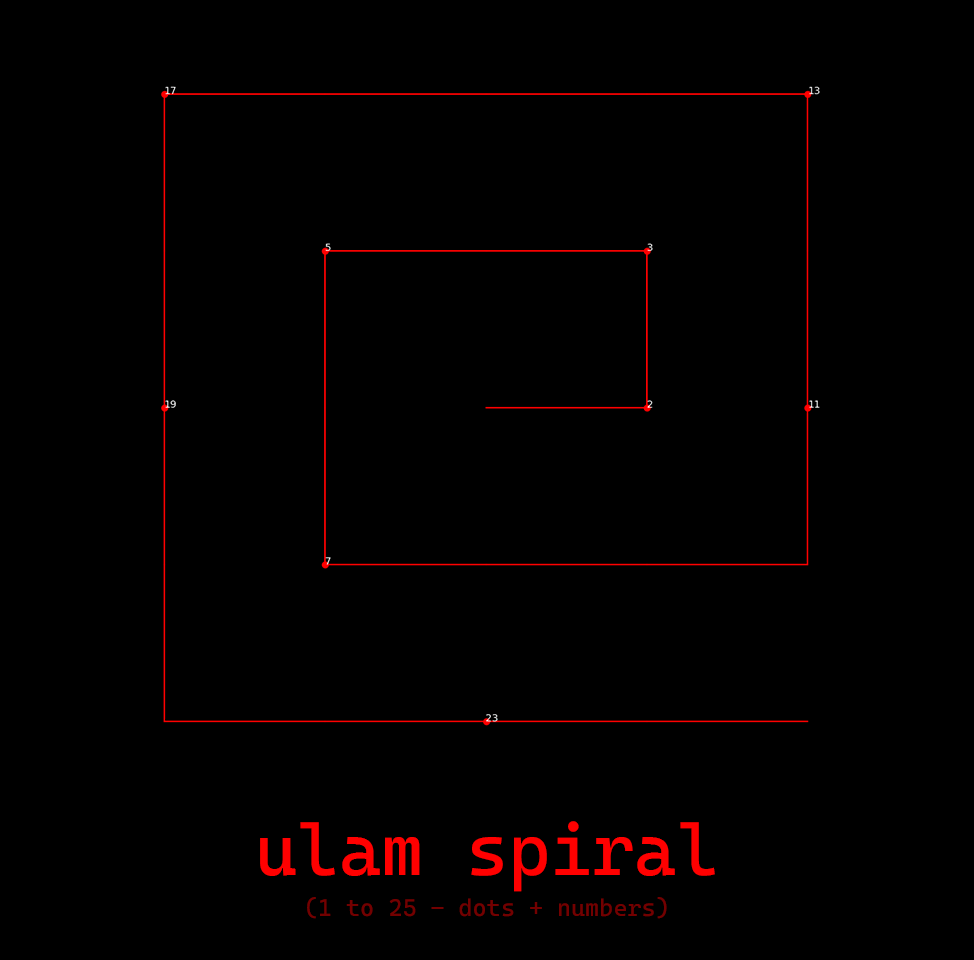
<style>
.page{position:relative;width:974px;height:960px;background:#000000}
.page>*{position:absolute;margin:0}
.t1{font:24px "CascadiaMono-Roman";color:#730000}
.t2{font:72px "CascadiaMono-Roman";color:#ff0000}
</style>
<div class="page">
<p class="t1" style="left:260px;top:821px;width:455px;height:98px;text-align:center"><span class="t2">ulam spiral <br><br></span>(1 to 25 - dots + numbers)</p>
</div>
